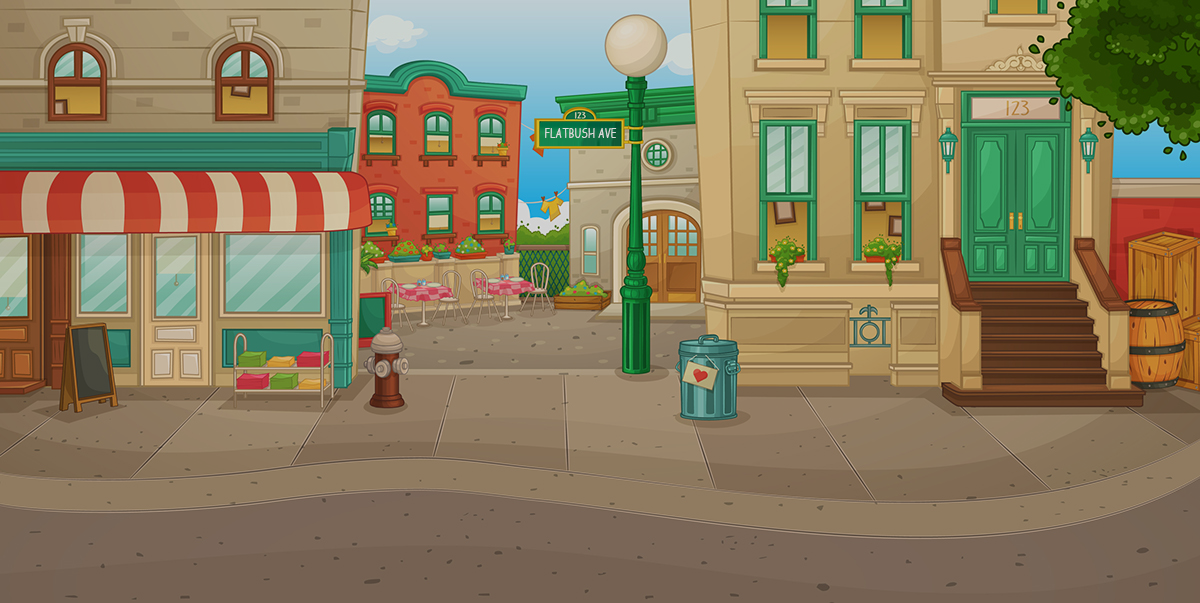
<style>
.page{position:relative;width:1200px;height:603px}
.page>*{position:absolute;margin:0}
.t1{font:12.5px "ComicSansMS";color:#d9d9d9;scale:0.75 1}
</style>
<div class="page">
<p class="t1" style="left:545px;top:128px;width:72px;height:10px">FLATBUSH AVE</p>
</div>
